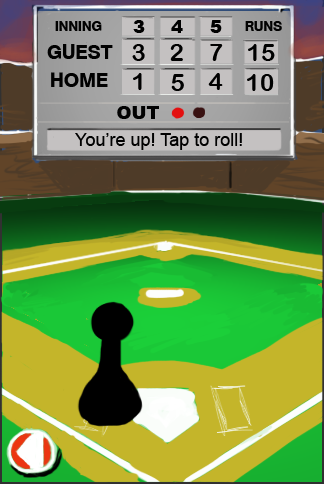
<style>
.page{position:relative;width:324px;height:484px}
.page>*{position:absolute;margin:0}
.t1{font:14px "AGSchulbuchTwoBQ-Medium";color:#010101}
.t2{font:18px "Arial-Black";color:#010101}
.t3{font:20px "AGSchulbuchTwoBQ-Medium";color:#010101}
.t4{font:24px "ArialRoundedMTBold";color:#010101}
.t5{font:18px "ArialMT";color:#010101}
</style>
<div class="page">
<p class="t1" style="left:55px;top:21px;width:47px;height:10px">INNING</p>
<p class="t2" style="left:133px;top:20px;width:12px;height:13px">3</p>
<p class="t2" style="left:171px;top:20px;width:12px;height:13px">4</p>
<p class="t2" style="left:210px;top:20px;width:12px;height:13px">5</p>
<p class="t1" style="left:245px;top:21px;width:37px;height:10px">RUNS</p>
<p class="t3" style="left:47px;top:44px;width:66px;height:15px">GUEST</p>
<p class="t4" style="left:132px;top:44px;width:13px;height:17px">3</p>
<p class="t4" style="left:170px;top:44px;width:13px;height:17px">2</p>
<p class="t4" style="left:210px;top:44px;width:13px;height:17px">7</p>
<p class="t4" style="left:248px;top:44px;width:27px;height:17px">15</p>
<p class="t3" style="left:51px;top:72px;width:57px;height:15px">HOME</p>
<p class="t4" style="left:133px;top:73px;width:9px;height:17px">1</p>
<p class="t4" style="left:171px;top:74px;width:13px;height:17px">5</p>
<p class="t4" style="left:208px;top:73px;width:15px;height:17px">4</p>
<p class="t4" style="left:247px;top:74px;width:27px;height:17px">10</p>
<p class="t2" style="left:117px;top:106px;width:42px;height:13px">OUT</p>
<p class="t5" style="left:75px;top:133px;width:167px;height:17px">You’re up! Tap to roll!</p>
</div>
